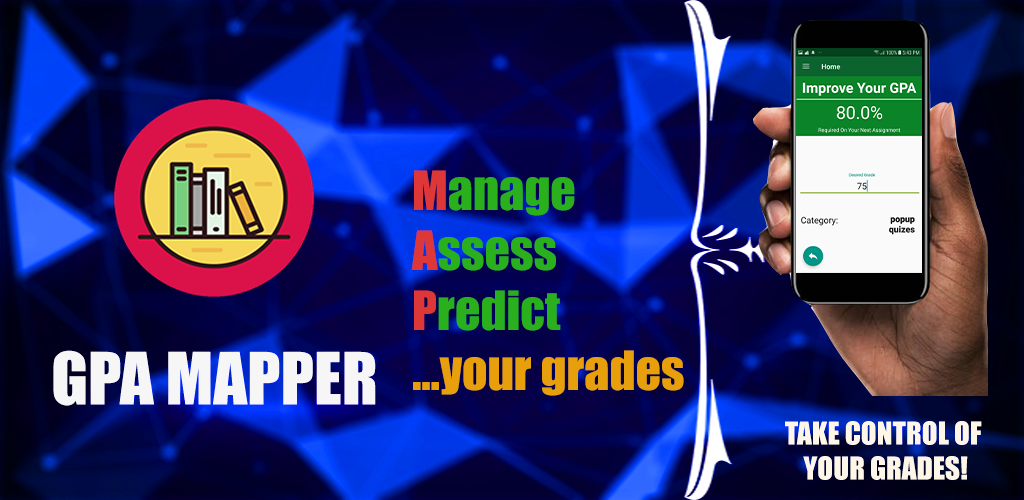
<style>
.page{position:relative;width:1024px;height:500px}
.page>*{position:absolute;margin:0}
.t1{font:50px "Impact";color:#e7a10c}
.t2{font:50px "Impact";color:#dd3737}
.t3{font:50px "Impact";color:#2ab01c}
.t4{font:66.7px "Impact";color:#f6f6f6}
.t5{font:29.2px "Impact";color:#f8f2ef}
</style>
<div class="page">
<p class="t1" style="left:411px;top:170px;width:273px;height:226px"><span class="t2">M</span><span class="t3">anage<br></span><span class="t2">A</span><span class="t3">ssess<br></span><span class="t2">P</span><span class="t3">redict<br></span>...your grades</p>
<p class="t4" style="left:53px;top:350px;width:323px;height:56px">GPA MAPPER</p>
<p class="t5" style="left:785px;top:421px;width:197px;height:59px;text-align:center">TAKE CONTROL OF<br> YOUR GRADES!</p>
</div>
